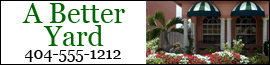
<style>
.page{position:relative;width:270px;height:65px;background:#ffffff}
.page>*{position:absolute;margin:0}
.t1{font:28px "Georgia";color:#006600}
.t2{font:16px "Georgia";color:#000000}
</style>
<div class="page">
<p class="t1" style="left:22px;top:3px;width:103px;height:43px">A Better Yard</p>
<p class="t2" style="left:25px;top:50px;width:96px;height:12px">404-555-1212</p>
</div>
